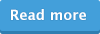
<style>
.page{position:relative;width:100px;height:34px;background:#439fda}
.page>*{position:absolute;margin:0}
.t1{font:14px "LucidaGrande-Bold";color:#ffffff}
</style>
<div class="page">
<p class="t1" style="left:11px;top:9px;width:75px;height:11px">Read more</p>
</div>
